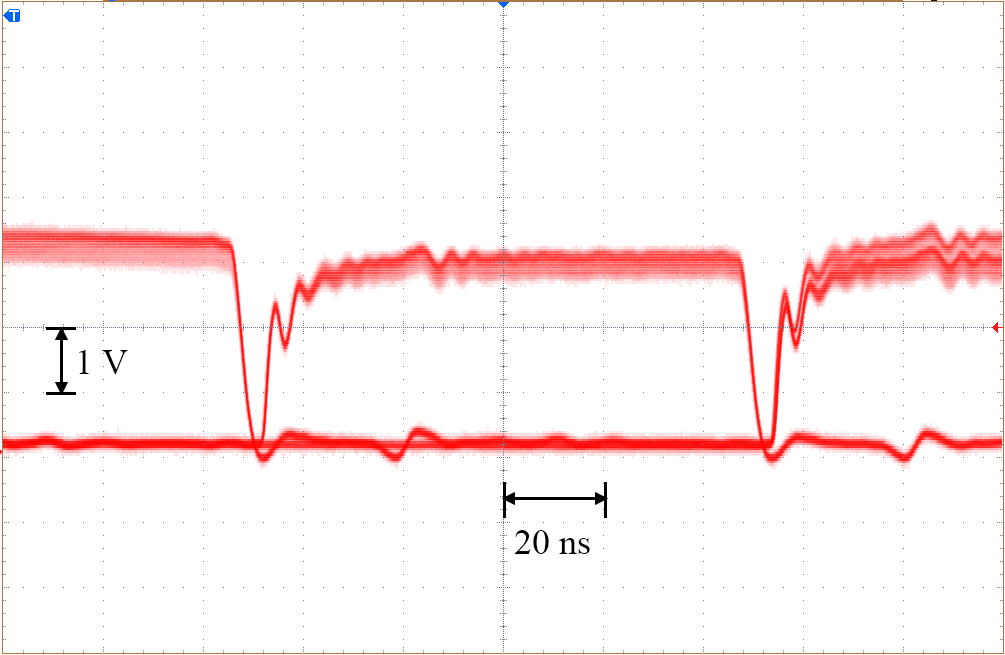
<style>
.page{position:relative;width:1005px;height:655px;background:#ffffff}
.page>*{position:absolute;margin:0}
.t1{font:36px "TimesNewRomanPSMT";color:#000000}
</style>
<div class="page">
<p class="t1" style="left:79px;top:350px;width:49px;height:24px">1 V</p>
<p class="t1" style="left:514px;top:530px;width:76px;height:24px">20 ns</p>
</div>
